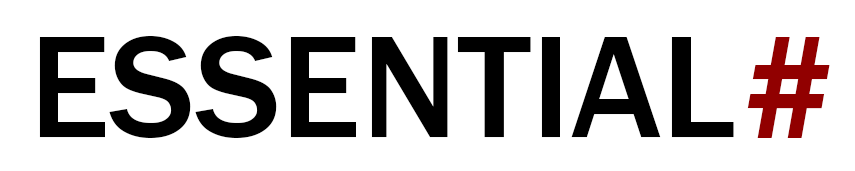
<style>
.page{position:relative;width:855px;height:171px;background:#ffffff}
.page>*{position:absolute;margin:0}
.t1{font:150px "FranklinGothic-Medium";color:#000000}
.t2{font:152.3px "FranklinGothic-Medium";color:#910000}
</style>
<div class="page">
<p class="t1" style="left:39px;top:36px;width:695px;height:102px">ESSENTIAL</p>
<p class="t2" style="left:747px;top:37px;width:83px;height:101px">#</p>
</div>
